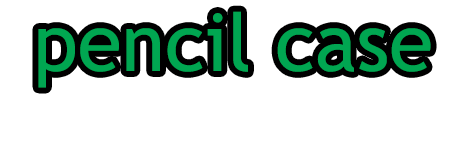
<style>
.page{position:relative;width:451px;height:154px;background:#ffffff}
.page>*{position:absolute;margin:0}
.t1{font:80px "TrebuchetMS";color:#00a651}
</style>
<div class="page">
<p class="t1" style="left:38px;top:11px;width:393px;height:77px">pencil case</p>
</div>
